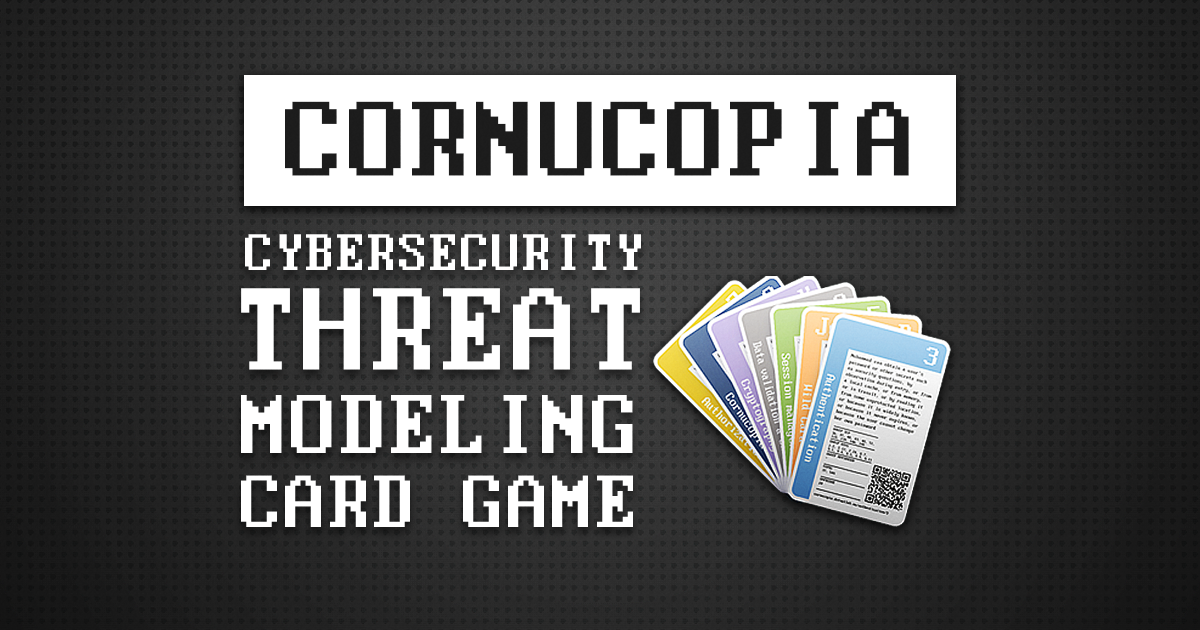
<style>
.page{position:relative;width:1200px;height:630px}
.page>*{position:absolute;margin:0}
.t1{font:117.7px "ModernDOS8x16";letter-spacing:0.04em;color:#1c1c1c}
.t2{font:57.3px "ModernDOS8x16";letter-spacing:0.04em;color:#ffffff}
.t3{font:129.6px "ModernDOS8x16";letter-spacing:0.04em;color:#ffffff}
.t4{font:92.8px "ModernDOS8x16";letter-spacing:0.04em;color:#ffffff}
.t5{font:82.4px "ModernDOS8x16";letter-spacing:0.04em;color:#ffffff}
</style>
<div class="page">
<p class="t1" style="left:285px;top:101px;width:624px;height:75px">CORNUCOPIA</p>
<p class="t2" style="left:245px;top:234px;width:396px;height:36px">CYBERSECURITY</p>
<p class="t3" style="left:241px;top:288px;width:399px;height:82px">THREAT</p>
<p class="t4" style="left:241px;top:395px;width:392px;height:58px">MODELING</p>
<p class="t5" style="left:241px;top:475px;width:392px;height:52px">CARD GAME</p>
</div>
